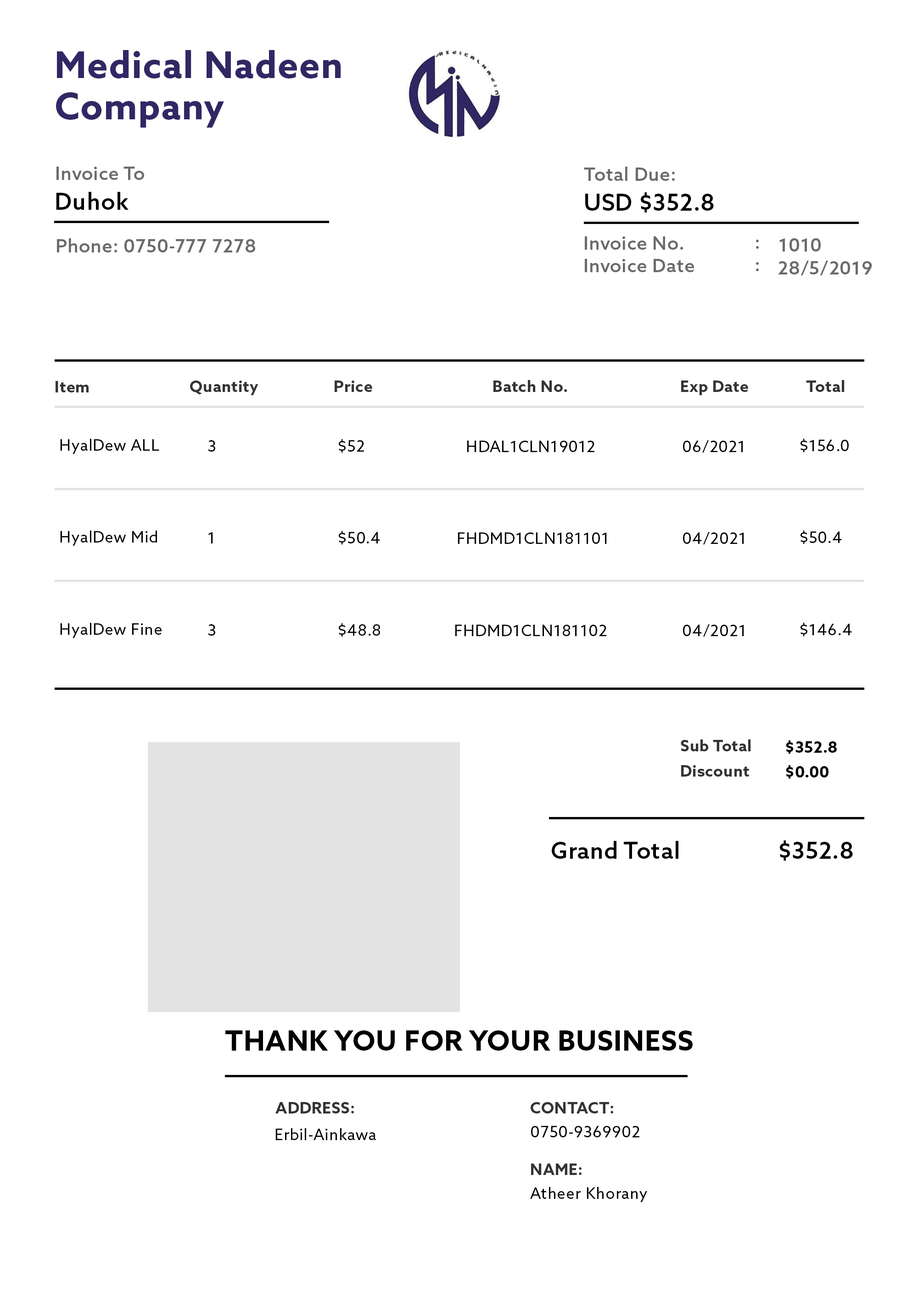
<style>
.page{position:relative;width:918px;height:1298px;background:#ffffff}
.page>*{position:absolute;margin:0}
.t1{font:36.7px/41.3px "AzoSans-Bold";letter-spacing:0.025em;color:#302864}
.t2{font:18.4px "AzoSans-Medium";letter-spacing:0.025em;color:#6c6a6a}
.t3{font:23px "AzoSans-Medium";letter-spacing:0.025em;color:#000000}
.t4{font:15.6px "AzoSans-Bold";letter-spacing:0.025em;color:#343434}
.t5{font:15.6px "AzoSans-Regular";letter-spacing:0.025em;color:#000000}
.t6{font:15.6px "AzoSans-Bold";letter-spacing:0.025em;color:#000000}
.t7{font:27.5px "AzoSans-Bold";letter-spacing:0.025em;color:#000000}
</style>
<div class="page">
<p class="t1" style="left:56px;top:50px;width:285px;height:78px">Medical Nadeen<br>Company</p>
<p class="t2" style="left:56px;top:167px;width:88px;height:13px">Invoice To</p>
<p class="t2" style="left:584px;top:167px;width:91px;height:14px">Total Due:</p>
<p class="t3" style="left:56px;top:192px;width:73px;height:18px">Duhok</p>
<p class="t3" style="left:585px;top:192px;width:129px;height:21px">USD $352.8</p>
<p class="t2" style="left:57px;top:238px;width:198px;height:15px">Phone: 0750-777 7278</p>
<p class="t2" style="left:585px;top:236px;width:99px;height:14px">Invoice No.</p>
<p class="t2" style="left:756px;top:240px;width:3px;height:9px">:</p>
<p class="t2" style="left:780px;top:238px;width:41px;height:14px">1010</p>
<p class="t2" style="left:585px;top:259px;width:109px;height:13px">Invoice Date</p>
<p class="t2" style="left:756px;top:262px;width:3px;height:9px">:</p>
<p class="t2" style="left:778px;top:261px;width:94px;height:14px">28/5/2019</p>
<p class="t4" style="left:56px;top:381px;width:33px;height:12px">Item</p>
<p class="t4" style="left:190px;top:381px;width:69px;height:14px">Quantity</p>
<p class="t4" style="left:335px;top:381px;width:37px;height:11px">Price</p>
<p class="t4" style="left:494px;top:380px;width:74px;height:12px">Batch No.</p>
<p class="t4" style="left:681px;top:381px;width:67px;height:14px">Exp Date</p>
<p class="t4" style="left:806px;top:380px;width:39px;height:12px">Total</p>
<p class="t5" style="left:60px;top:439px;width:99px;height:15px">HyalDew ALL</p>
<p class="t5" style="left:208px;top:440px;width:7px;height:12px">3</p>
<p class="t5" style="left:339px;top:439px;width:25px;height:14px">$52</p>
<p class="t5" style="left:467px;top:441px;width:128px;height:11px">HDAL1CLN19012</p>
<p class="t5" style="left:683px;top:440px;width:60px;height:13px">06/2021</p>
<p class="t5" style="left:801px;top:438px;width:48px;height:15px">$156.0</p>
<p class="t5" style="left:60px;top:531px;width:97px;height:15px">HyalDew Mid</p>
<p class="t5" style="left:208px;top:532px;width:5px;height:12px">1</p>
<p class="t5" style="left:339px;top:531px;width:41px;height:14px">$50.4</p>
<p class="t5" style="left:458px;top:533px;width:149px;height:11px">FHDMD1CLN181101</p>
<p class="t5" style="left:683px;top:532px;width:61px;height:13px">04/2021</p>
<p class="t5" style="left:801px;top:530px;width:41px;height:15px">$50.4</p>
<p class="t5" style="left:60px;top:623px;width:102px;height:15px">HyalDew Fine</p>
<p class="t5" style="left:208px;top:624px;width:7px;height:12px">3</p>
<p class="t5" style="left:339px;top:623px;width:41px;height:14px">$48.8</p>
<p class="t5" style="left:455px;top:625px;width:152px;height:11px">FHDMD1CLN181102</p>
<p class="t5" style="left:683px;top:624px;width:61px;height:13px">04/2021</p>
<p class="t5" style="left:801px;top:623px;width:51px;height:14px">$146.4</p>
<p class="t4" style="left:681px;top:740px;width:70px;height:12px">Sub Total</p>
<p class="t6" style="left:786px;top:741px;width:51px;height:13px">$352.8</p>
<p class="t4" style="left:681px;top:765px;width:68px;height:12px">Discount</p>
<p class="t6" style="left:786px;top:765px;width:43px;height:14px">$0.00</p>
<p class="t3" style="left:552px;top:841px;width:127px;height:18px">Grand Total</p>
<p class="t3" style="left:780px;top:841px;width:73px;height:20px">$352.8</p>
<p class="t7" style="left:225px;top:1031px;width:468px;height:20px">THANK YOU FOR YOUR BUSINESS</p>
<p class="t4" style="left:275px;top:1102px;width:79px;height:12px">ADDRESS:</p>
<p class="t4" style="left:531px;top:1102px;width:82px;height:12px">CONTACT:</p>
<p class="t5" style="left:275px;top:1129px;width:102px;height:12px">Erbil-Ainkawa</p>
<p class="t5" style="left:531px;top:1126px;width:109px;height:12px">0750-9369902</p>
<p class="t4" style="left:531px;top:1164px;width:51px;height:11px">NAME:</p>
<p class="t5" style="left:530px;top:1187px;width:117px;height:16px">Atheer Khorany</p>
</div>
